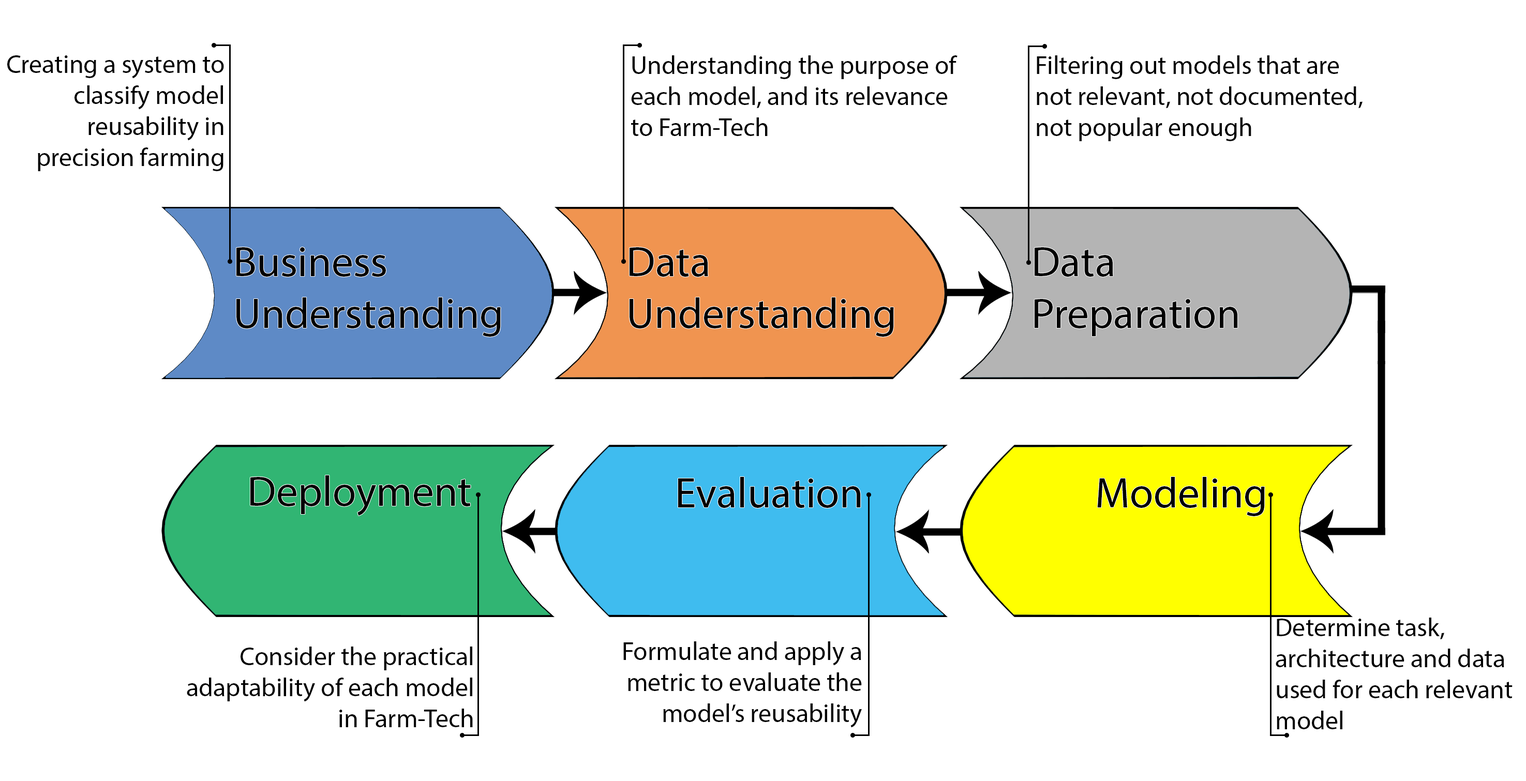
<style>
.page{position:relative;width:1526px;height:781px;background:#ffffff}
.page>*{position:absolute;margin:0}
.t1{font:25.9px "MyriadPro-Regular";color:#000000}
.t2{font:43.1px "MyriadPro-Regular";color:#000000}
</style>
<div class="page">
<p class="t1" style="left:7px;top:55px;width:217px;height:116px;text-align:right">Creating a system to classify model reusability in precision farming</p>
<p class="t1" style="left:631px;top:55px;width:327px;height:81px">Understanding the purpose of each model, and its relevance to Farm-Tech</p>
<p class="t1" style="left:1037px;top:55px;width:326px;height:86px">Filtering out models that are not relevant, not documented, not popular enough</p>
<p class="t2" style="left:236px;top:247px;width:265px;height:90px">Business Understanding</p>
<p class="t2" style="left:630px;top:247px;width:264px;height:90px">Data Understanding</p>
<p class="t2" style="left:1035px;top:247px;width:203px;height:89px">Data Preparation</p>
<p class="t2" style="left:250px;top:475px;width:221px;height:41px">Deployment</p>
<p class="t2" style="left:678px;top:477px;width:183px;height:31px">Evaluation</p>
<p class="t2" style="left:1097px;top:477px;width:168px;height:39px">Modeling</p>
<p class="t1" style="left:1276px;top:618px;width:237px;height:112px">Determine task, architecture and data used for each relevant model</p>
<p class="t1" style="left:623px;top:642px;width:239px;height:86px;text-align:right">Formulate and apply a metric to evaluate the model’s reusability</p>
<p class="t1" style="left:187px;top:647px;width:286px;height:80px;text-align:right">Consider the practical adaptability of each model in Farm-Tech</p>
</div>
